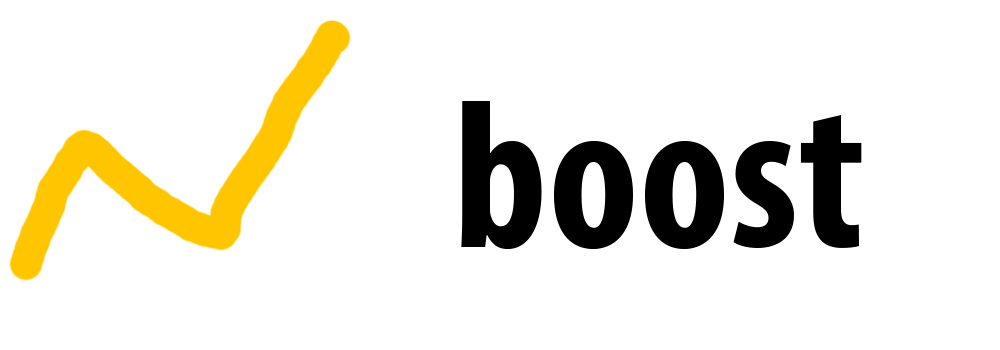
<style>
.page{position:relative;width:1000px;height:350px;background:#ffffff}
.page>*{position:absolute;margin:0}
.t1{font:211.7px "MyriadPro-BoldCond";color:#000000}
</style>
<div class="page">
<p class="t1" style="left:461px;top:101px;width:401px;height:149px">boost</p>
</div>
